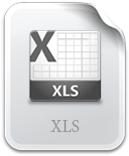
<style>
.page{position:relative;width:129px;height:156px}
.page>*{position:absolute;margin:0}
.t1{font:17.6px "MinionPro-Regular";color:#999999}
</style>
<div class="page">
<p class="t1" style="left:50px;top:120px;width:29px;height:12px">XLS</p>
</div>
